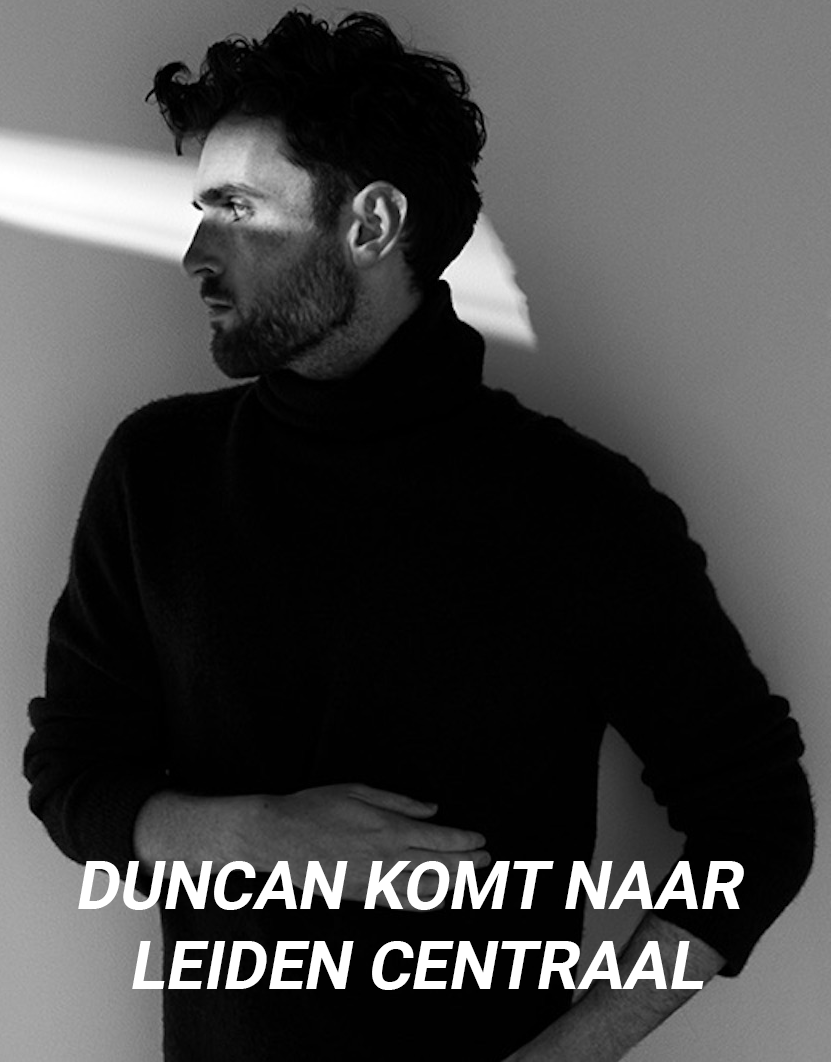
<style>
.page{position:relative;width:831px;height:1062px;background:#010101}
.page>*{position:absolute;margin:0}
.t1{font:66.7px "Roboto-Bold";color:#ffffff;text-transform:uppercase;font-style:italic}
</style>
<div class="page">
<p class="t1" style="left:78px;top:861px;width:666px;height:129px;text-align:center">Duncan komt naar <br>leiden centraal</p>
</div>
